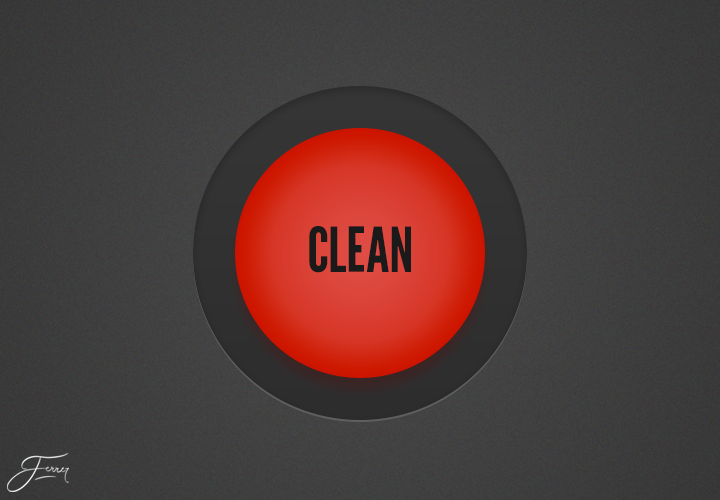
<style>
.page{position:relative;width:720px;height:500px}
.page>*{position:absolute;margin:0}
.t1{font:62px "LeagueGothic-Regular";color:#242424}
</style>
<div class="page">
<p class="t1" style="left:309px;top:226px;width:102px;height:47px">CLEAN</p>
</div>
